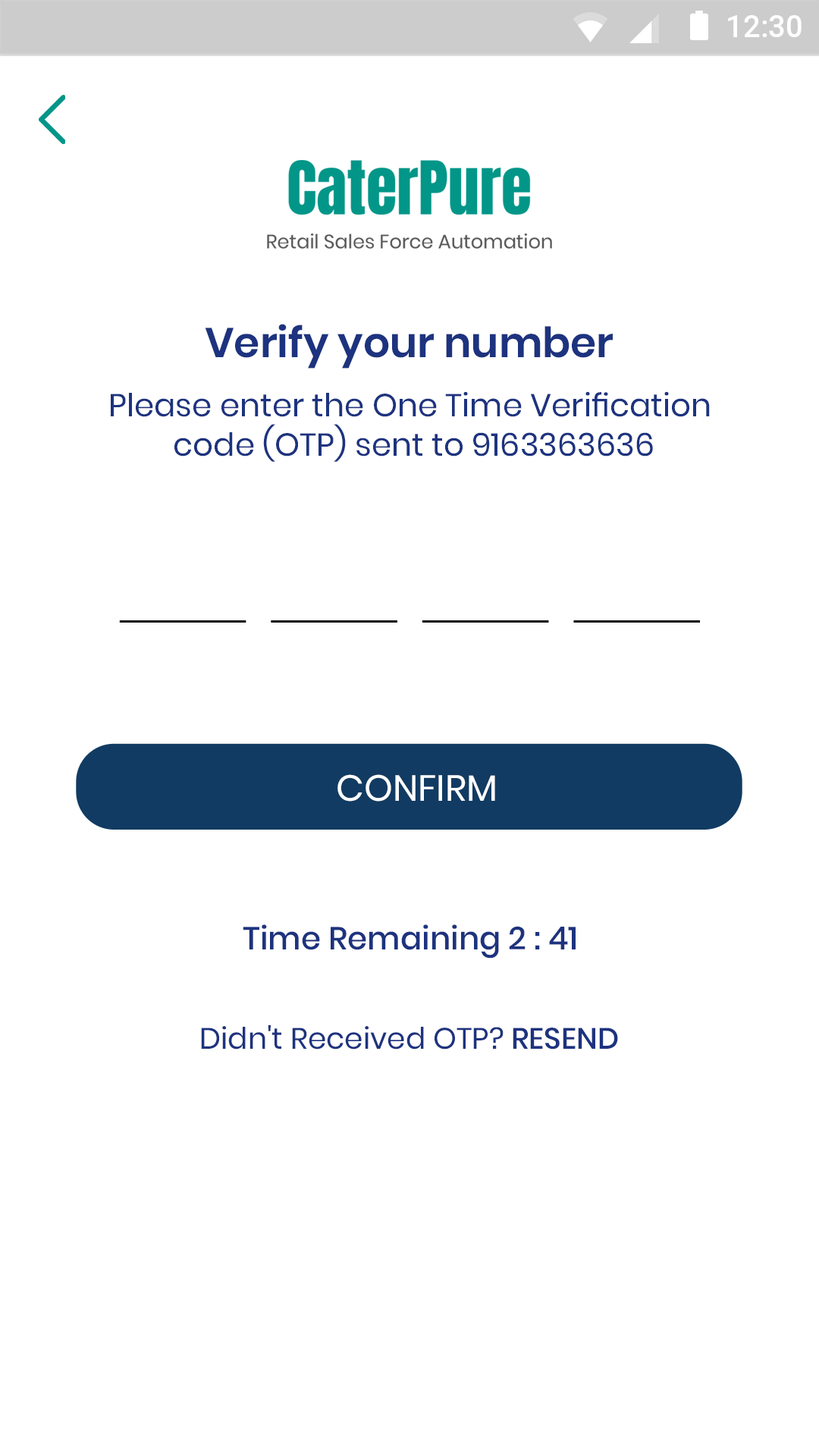
<style>
.page{position:relative;width:819px;height:1456px;background:#ffffff}
.page>*{position:absolute;margin:0}
.t1{font:31.2px "Roboto-Medium";color:#ffffff}
.t2{font:31.8px/59.1px "Poppins-Regular";color:#1d337f}
.t3{font:41.7px/59.1px "Poppins-SemiBold";color:#1d337f}
.t4{font:31.8px/39.4px "Poppins-Regular";color:#1d337f}
.t5{font:36.4px "Poppins-Regular";color:#ffffff;text-transform:uppercase}
.t6{font:31.8px "Poppins-Medium";color:#1d337f}
.t7{font:29.6px "Poppins-Regular";color:#1d337f}
.t8{font:29.6px "Poppins-Medium";color:#1d337f}
</style>
<div class="page">
<p class="t1" style="left:728px;top:15px;width:74px;height:22px">12:30</p>
<p class="t2" style="left:111px;top:324px;width:599px;height:138px;text-align:center"><span class="t3">Verify your number <br></span>Please enter the One Time Verification <br><span class="t4">code (OTP) sent to 9163363636</span></p>
<p class="t5" style="left:337px;top:774px;width:158px;height:28px">Confirm</p>
<p class="t6" style="left:243px;top:924px;width:333px;height:35px">Time Remaining 2 : 41</p>
<p class="t7" style="left:201px;top:1024px;width:417px;height:26px">Didn't Received OTP? <span class="t8">RESEND</span></p>
</div>
